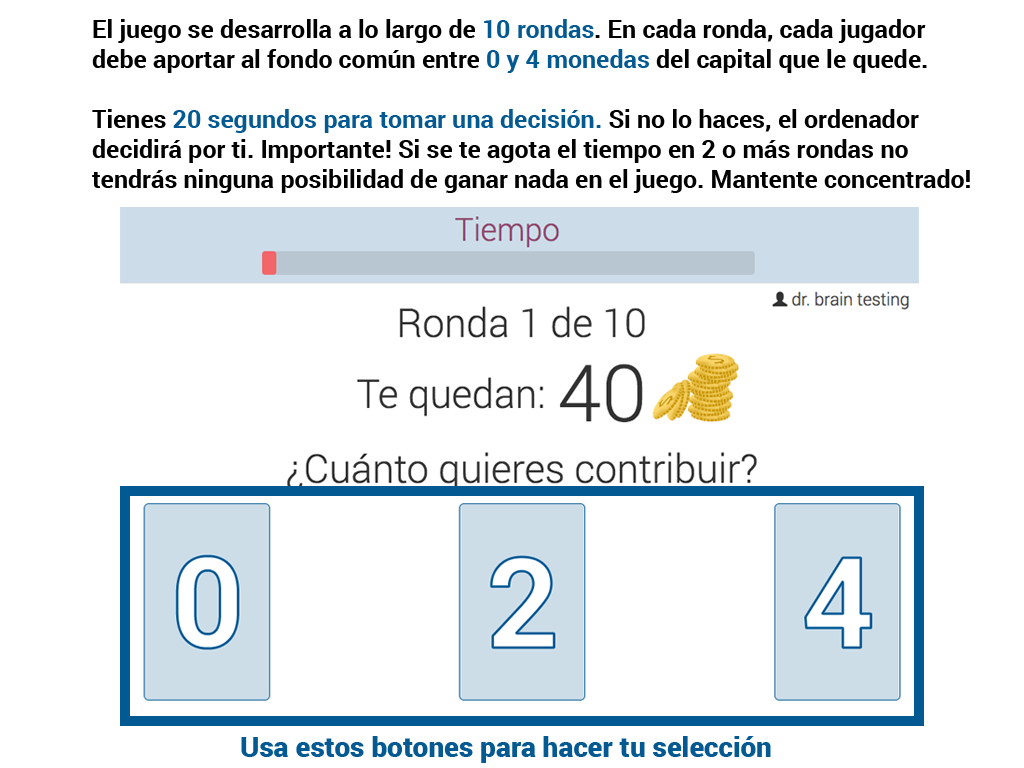
<style>
.page{position:relative;width:1024px;height:768px;background:#ffffff}
.page>*{position:absolute;margin:0}
.t1{font:25px "Roboto-Bold";color:#000000}
.t2{font:25px "Roboto-Bold";color:#035992}
.t3{font:28px "Roboto-Black";color:#035992}
</style>
<div class="page">
<p class="t1" style="left:92px;top:19px;width:878px;height:174px">El juego se desarrolla a lo largo de <span class="t2">10 rondas</span>. En cada ronda, cada jugador<br>debe aportar al fondo común entre <span class="t2">0 y 4 monedas</span> del capital que le quede.<br><br>Tienes <span class="t2">20 segundos para tomar una decisión.</span> Si no lo haces, el ordenador <br>decidirá por ti. Importante! Si se te agota el tiempo en 2 o más rondas no <br>tendrás ninguna posibilidad de ganar nada en el juego. Mantente concentrado!</p>
<p class="t3" style="left:241px;top:736px;width:530px;height:27px">Usa estos botones para hacer tu selección</p>
</div>
